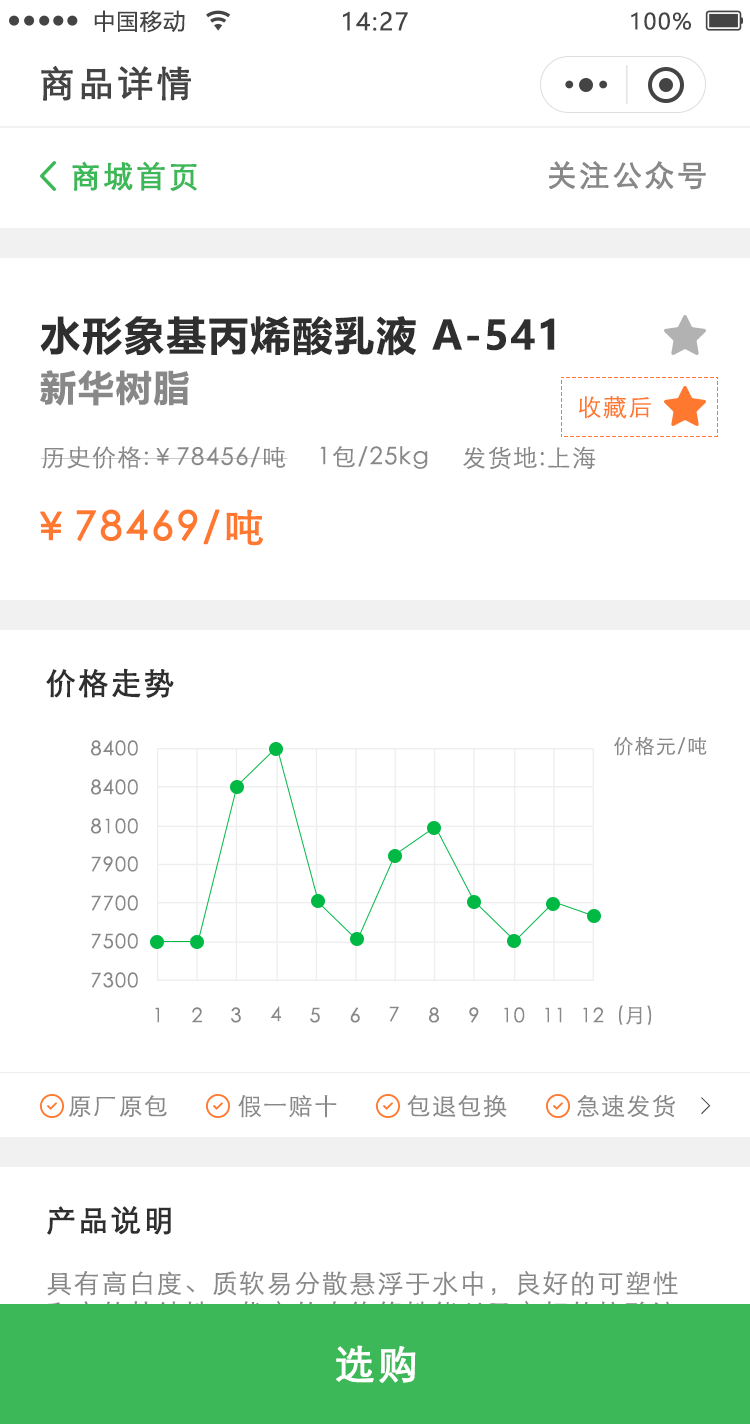
<style>
.page{position:relative;width:750px;height:1424px;background:#ffffff}
.page>*{position:absolute;margin:0}
.t1{font:22px "MicrosoftYaHei";letter-spacing:0.06em;color:#444444}
.t2{font:24px "MicrosoftYaHei";letter-spacing:0.06em;color:#444444}
.t3{font:36px "STXihei";letter-spacing:0.06em;color:#444444;font-weight:bold}
.t4{font:30px "STXihei";letter-spacing:0.06em;color:#3db858;font-weight:bold}
.t5{font:30px "STXihei";letter-spacing:0.06em;color:#888888;font-weight:bold}
.t6{font:40px "MicrosoftYaHei-Bold";letter-spacing:0.05em;color:#302f2f}
.t7{font:36px "MicrosoftYaHei-Bold";letter-spacing:0.05em;color:#888888}
.t8{font:24px "STXihei";letter-spacing:0.06em;color:#ff782f}
.t9{font:24px "STXihei";letter-spacing:0.06em;color:#888888}
.t10{font:40px "STXihei";letter-spacing:0.06em;color:#ff782f;font-weight:bold}
.t11{font:30px "STXihei";letter-spacing:0.06em;color:#302f2f;font-weight:bold}
.t12{font:20px "STXihei";letter-spacing:0.06em;color:#888888}
.t13{font:24px "SimSun";letter-spacing:0.06em;color:#444444}
.t14{font:26px/30px "STXihei";letter-spacing:0.06em}
.t15{font:40px "STXihei";letter-spacing:0.06em;color:#ffffff;font-weight:bold}
</style>
<div class="page">
<p class="t1" style="left:94px;top:10px;width:91px;height:23px">中国移动</p>
<p class="t2" style="left:343px;top:11px;width:65px;height:20px">14:27</p>
<p class="t1" style="left:631px;top:12px;width:60px;height:18px">100%</p>
<p class="t3" style="left:41px;top:65px;width:150px;height:36px">商品详情</p>
<p class="t4" style="left:72px;top:161px;width:125px;height:30px">商城首页</p>
<p class="t5" style="left:549px;top:161px;width:157px;height:29px">关注公众号</p>
<p class="t6" style="left:40px;top:316px;width:515px;height:40px">水形象基丙烯酸乳液 A-541</p>
<p class="t7" style="left:40px;top:370px;width:149px;height:36px">新华树脂</p>
<p class="t8" style="left:578px;top:396px;width:73px;height:23px">收藏后</p>
<p class="t9" style="left:40px;top:446px;width:248px;height:23px">历史价格:￥78456/吨</p>
<p class="t9" style="left:320px;top:446px;width:108px;height:23px">1包/25kg</p>
<p class="t9" style="left:463px;top:446px;width:133px;height:24px">发货地:上海</p>
<p class="t10" style="left:40px;top:509px;width:223px;height:37px">￥78469/吨</p>
<p class="t11" style="left:46px;top:668px;width:128px;height:30px">价格走势</p>
<p class="t12" style="left:614px;top:736px;width:93px;height:20px">价格元/吨</p>
<p class="t12" style="left:91px;top:740px;width:47px;height:16px">8400</p>
<p class="t12" style="left:91px;top:779px;width:47px;height:16px">8400</p>
<p class="t12" style="left:91px;top:818px;width:47px;height:16px">8100</p>
<p class="t12" style="left:91px;top:856px;width:47px;height:16px">7900</p>
<p class="t12" style="left:91px;top:895px;width:47px;height:16px">7700</p>
<p class="t12" style="left:91px;top:933px;width:47px;height:16px">7500</p>
<p class="t12" style="left:91px;top:972px;width:47px;height:16px">7300</p>
<p class="t12" style="left:155px;top:1007px;width:4px;height:16px">1</p>
<p class="t12" style="left:192px;top:1007px;width:10px;height:16px">2</p>
<p class="t12" style="left:231px;top:1007px;width:10px;height:16px">3</p>
<p class="t12" style="left:270px;top:1006px;width:11px;height:16px">4</p>
<p class="t12" style="left:310px;top:1007px;width:10px;height:16px">5</p>
<p class="t12" style="left:350px;top:1007px;width:10px;height:16px">6</p>
<p class="t12" style="left:389px;top:1006px;width:10px;height:16px">7</p>
<p class="t12" style="left:429px;top:1007px;width:10px;height:16px">8</p>
<p class="t12" style="left:469px;top:1007px;width:10px;height:16px">9</p>
<p class="t12" style="left:504px;top:1007px;width:21px;height:16px">10</p>
<p class="t12" style="left:545px;top:1007px;width:17px;height:16px">11</p>
<p class="t12" style="left:583px;top:1007px;width:21px;height:16px">12</p>
<p class="t12" style="left:619px;top:1005px;width:33px;height:20px">(月)</p>
<p class="t9" style="left:69px;top:1095px;width:98px;height:22px">原厂原包</p>
<p class="t9" style="left:238px;top:1095px;width:99px;height:23px">假一赔十</p>
<p class="t9" style="left:407px;top:1095px;width:100px;height:23px">包退包换</p>
<p class="t9" style="left:577px;top:1094px;width:98px;height:24px">急速发货</p>
<p class="t13" style="left:701px;top:1097px;width:10px;height:18px">&gt;</p>
<p class="t11" style="left:47px;top:1206px;width:124px;height:29px">产品说明</p>
<p class="t14" style="left:47px;top:1271px;width:631px;height:85px">具有高白度、质软易分散悬浮于水中，良好的可塑性<br>和高的粘结性、优良的电绝缘性能以及良好的抗酸溶<br>液、很低的阳离子交换容量。</p>
<p class="t15" style="left:336px;top:1345px;width:80px;height:38px">选购</p>
</div>
